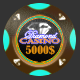
<style>
.page{position:relative;width:80px;height:80px;background:#333333}
.page>*{position:absolute;margin:0}
.t1{font:10.8px/3.6px "EdwardianScriptITC";color:#fda047}
.t2{font:6.3px/5.4px "Castellar";color:#fda047;scale:1.5 1}
.t3{font:10.6px "BernardMT-Condensed";color:#e19012;scale:1.12 1}
</style>
<div class="page">
<p class="t1" style="left:19px;top:30px;width:41px;height:14px;text-align:justify">Diamond<br><span class="t2">CASINO</span></p>
<p class="t3" style="left:25px;top:45px;width:30px;height:10px">5000$</p>
</div>
